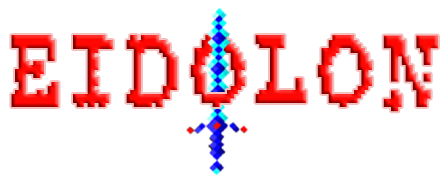
<style>
.page{position:relative;width:448px;height:186px;background:#ffffff}
.page>*{position:absolute;margin:0}
.t1{font:84.2px "RubberBiscuitBold";scale:0.86 1}
</style>
<div class="page">
<p class="t1" style="left:11px;top:35px;width:427px;height:77px">Eidolon</p>
</div>
